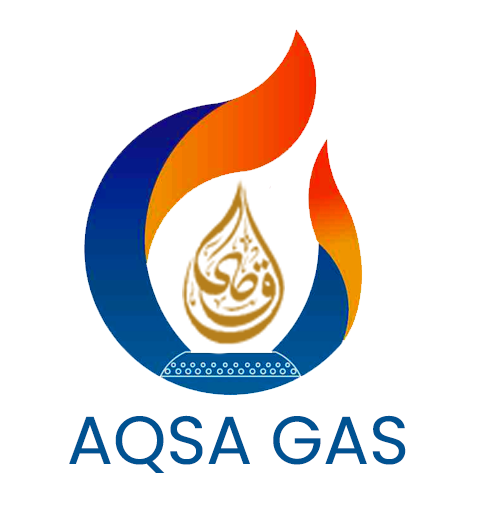
<style>
.page{position:relative;width:477px;height:512px;background:#ffffff}
.page>*{position:absolute;margin:0}
.t1{font:68px "Poppins-Regular";color:#005292}
</style>
<div class="page">
<p class="t1" style="left:69px;top:415px;width:337px;height:58px">AQSA GAS</p>
</div>
